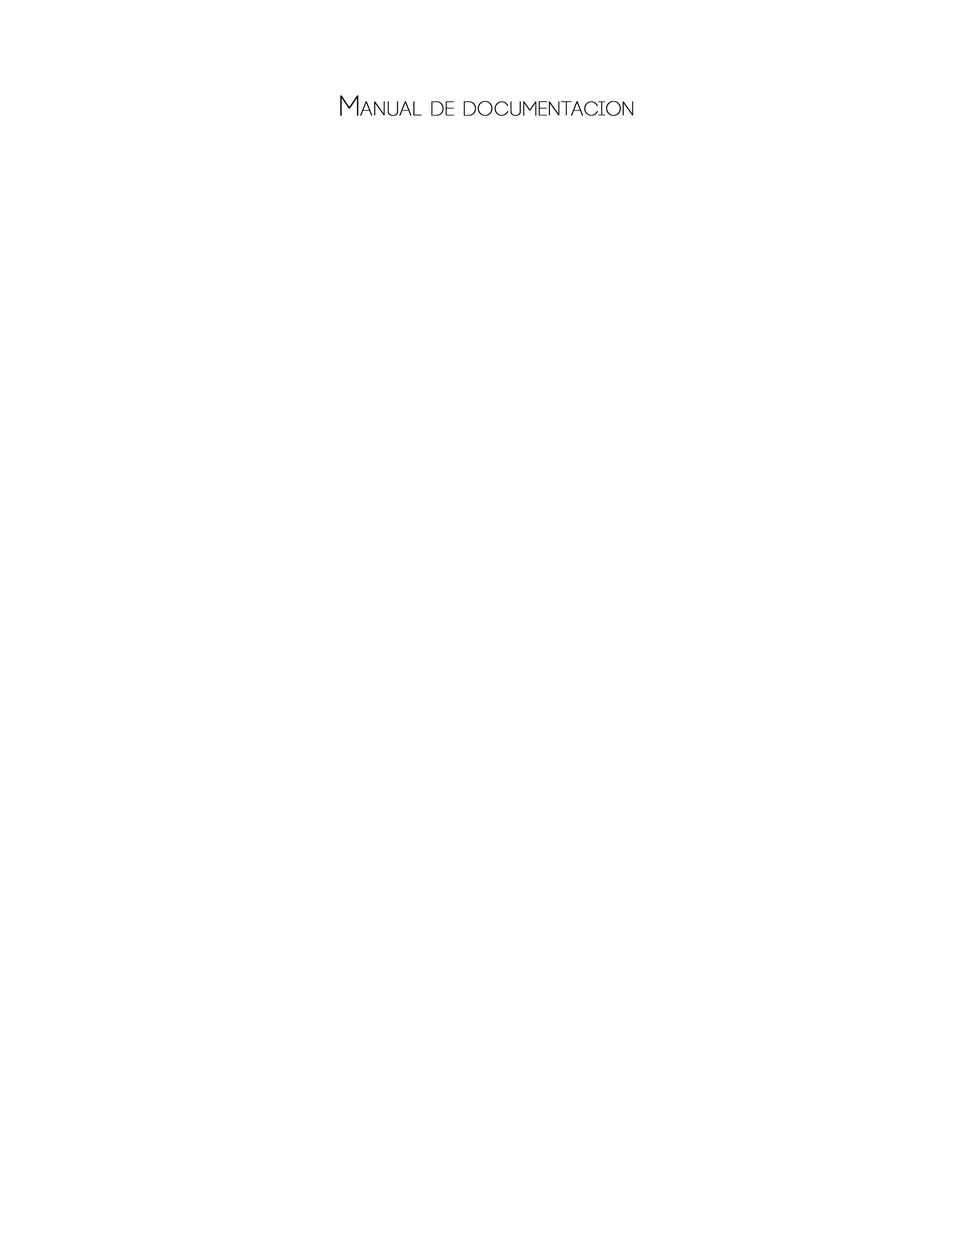
<style>
.page{position:relative;width:960px;height:1242px;background:#ffffff}
.page>*{position:absolute;margin:0}
.t1{font:28.2px "Code-Pro-Light";color:#000000;font-variant:small-caps;font-weight:bold}
</style>
<div class="page">
<p class="t1" style="left:340px;top:95px;width:293px;height:21px">Manual de documentacion</p>
</div>
